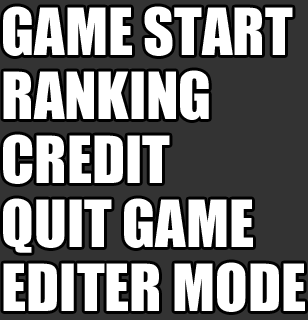
<style>
.page{position:relative;width:308px;height:320px;background:#ffffff}
.page>*{position:absolute;margin:0}
.t1{font:60px/64px "Impact";color:#ffffff}
</style>
<div class="page">
<p class="t1" style="left:3px;top:6px;width:302px;height:306px">GAME START<br>RANKING<br>CREDIT<br>QUIT GAME<br>EDITER MODE</p>
</div>
